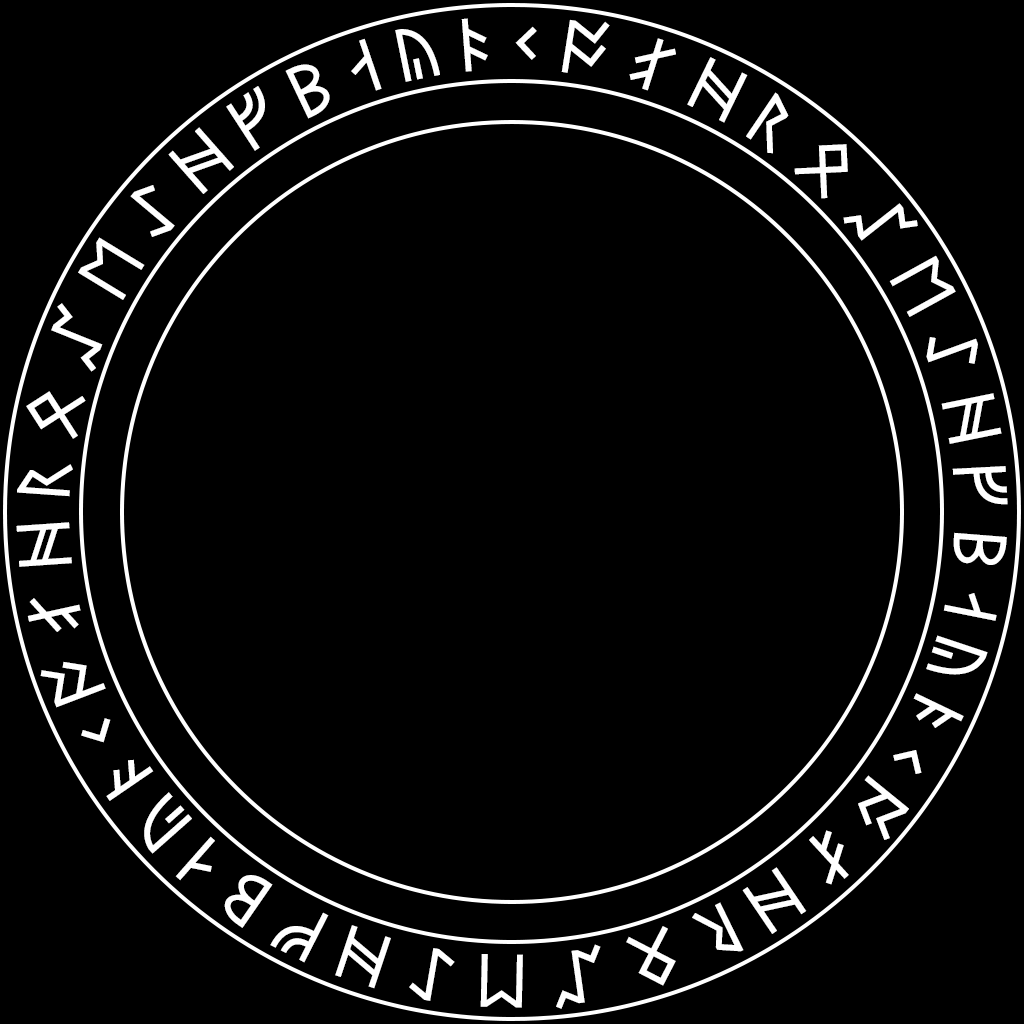
<style>
.page{position:relative;width:1024px;height:1024px;background:#000000}
.page>*{position:absolute;margin:0}
.t1{font:60px "BabelStoneRunic";letter-spacing:0.235em;color:#ffffff}
</style>
<div class="page">
<p class="t1" style="left:16px;top:18px;width:992px;height:991px">ᛒᛆᚣᚭᚲᚩᚰᚻᚱᛟᛢᛖᛇᚻᚠᛒᛆᚣᚭᚲᚩᚰᚻᚱᛟᛢᛖᛇᚻᚠᛒᛆᚣᚭᚲᚩᚰᚻᚱᛟᛢᛖᛇᚻᚠ</p>
</div>
